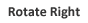
<style>
.page{position:relative;width:88px;height:23px;background:#ffffff}
.page>*{position:absolute;margin:0}
.t1{font:14px "Calibri-Bold";color:#363535}
</style>
<div class="page">
<p class="t1" style="left:8px;top:6px;width:72px;height:13px">Rotate Right</p>
</div>
